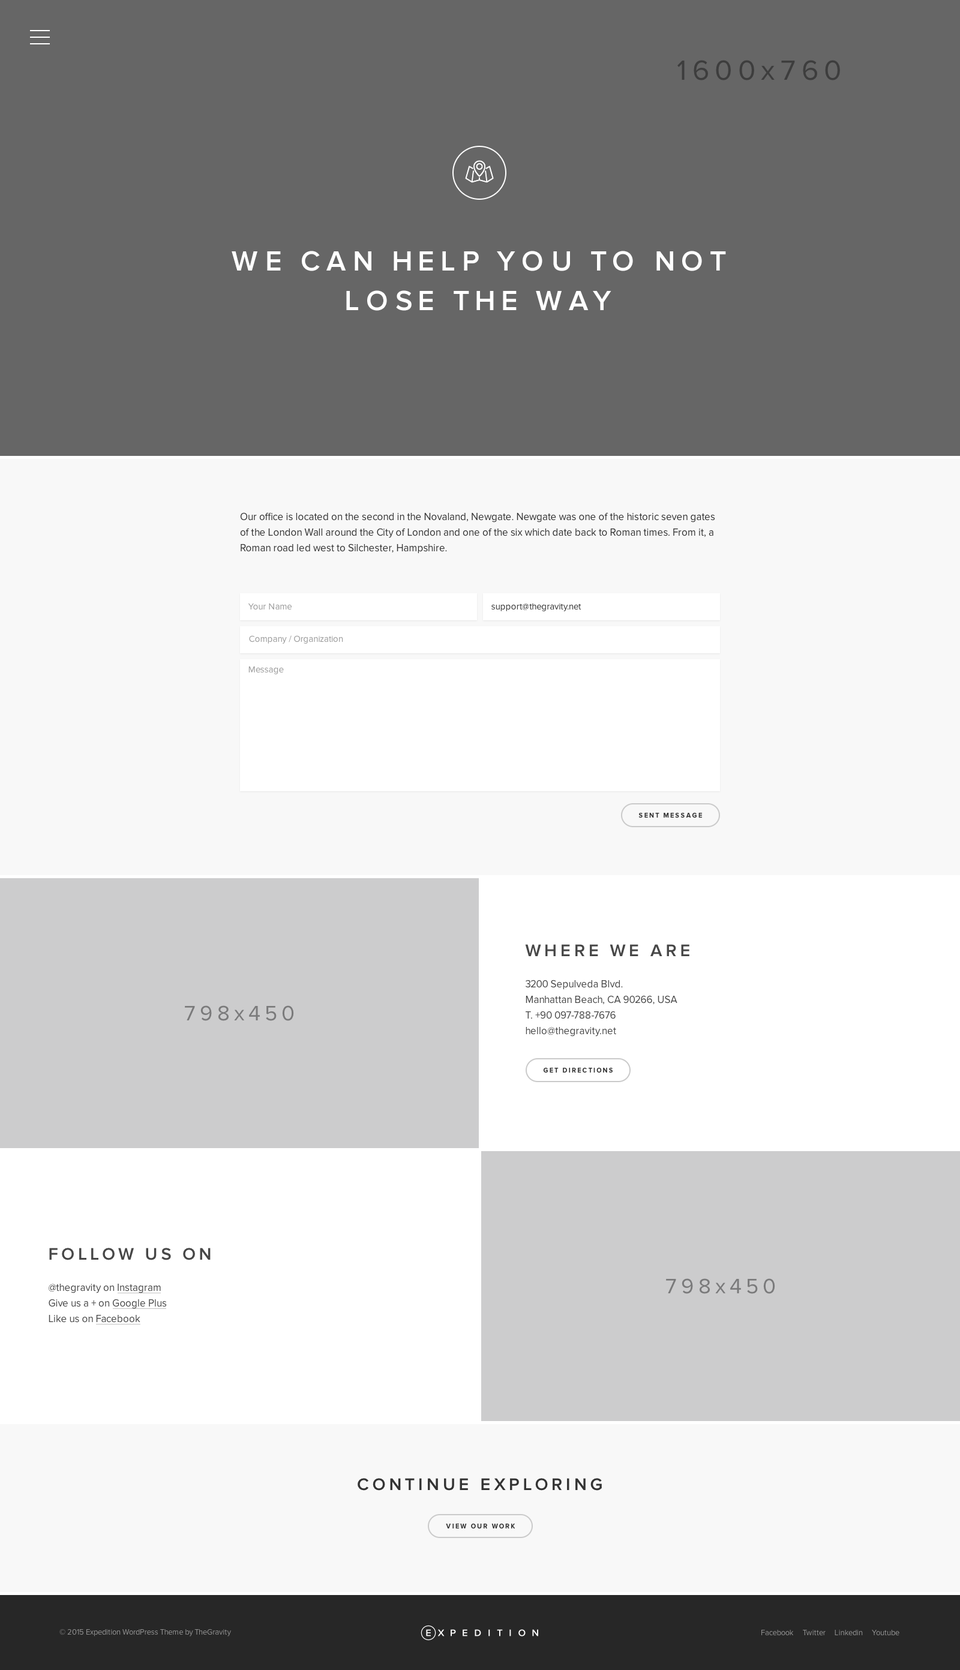
<style>
.page{position:relative;width:960px;height:1670px;background:#f8f8f8}
.page>*{position:absolute;margin:0}
.t1{font:28.8px "ProximaNova-Regular";letter-spacing:0.2em;color:#3d3d3d}
.t2{font:28.8px/39.6px "ProximaNova-Semibold";letter-spacing:0.2em;color:#ffffff;text-transform:uppercase}
.t3{font:10.2px/15.6px "ProximaNova-Regular";color:#333333}
.t4{font:9px "ProximaNova-Regular";color:#999999}
.t5{font:9px "ProximaNova-Regular";color:#333333}
.t6{font:6.6px "ProximaNova-Bold";letter-spacing:0.2em;color:#303030;text-transform:uppercase}
.t7{font:17.4px/22.8px "ProximaNova-Semibold";letter-spacing:0.2em;color:#333333;text-transform:uppercase}
.t8{font:21.6px "ProximaNova-Regular";letter-spacing:0.2em;color:#7a7a7b}
.t9{font:17.4px "ProximaNova-Semibold";letter-spacing:0.2em;color:#333333;text-transform:uppercase}
.t10{font:7.8px "ProximaNova-Regular";color:#939393}
</style>
<div class="page">
<p class="t1" style="left:677px;top:60px;width:163px;height:20px">1600x760</p>
<p class="t2" style="left:232px;top:251px;width:494px;height:60px;text-align:center">We can help you to not<br>lose the way</p>
<p class="t3" style="left:240px;top:512px;width:475px;height:42px">Our office is located on the second in the Novaland, Newgate. Newgate was one of the historic seven gates of the London Wall around the City of London and one of the six which date back to Roman times. From it, a Roman road led west to Silchester, Hampshire.</p>
<p class="t4" style="left:248px;top:604px;width:44px;height:6px">Your Name</p>
<p class="t5" style="left:491px;top:604px;width:90px;height:7px">support@thegravity.net</p>
<p class="t4" style="left:249px;top:635px;width:94px;height:9px">Company / Organization</p>
<p class="t4" style="left:248px;top:667px;width:36px;height:7px">Message</p>
<p class="t6" style="left:638px;top:812px;width:64px;height:6px">Sent message</p>
<p class="t3" style="left:525px;top:944px;width:164px;height:93px"><span class="t7">Where we are<br></span><br>3200 Sepulveda Blvd.<br>Manhattan Beach, CA 90266, USA<br>T. +90 097-788-7676<br>hello@thegravity.net</p>
<p class="t8" style="left:185px;top:1006px;width:109px;height:15px">798x450</p>
<p class="t6" style="left:543px;top:1067px;width:70px;height:6px">Get directions</p>
<p class="t3" style="left:49px;top:1248px;width:162px;height:75px"><span class="t7">Follow us on<br></span><br>@thegravity on Instagram<br>Give us a + on Google Plus<br>Like us on Facebook</p>
<p class="t8" style="left:666px;top:1279px;width:109px;height:15px">798x450</p>
<p class="t9" style="left:358px;top:1478px;width:244px;height:13px">Continue Exploring</p>
<p class="t6" style="left:446px;top:1524px;width:69px;height:5px">View our work</p>
<p class="t10" style="left:59px;top:1629px;width:172px;height:8px">© 2015 Expedition WordPress Theme by TheGravity</p>
<p class="t10" style="left:761px;top:1630px;width:138px;height:6px">Facebook     Twitter     Linkedin     Youtube</p>
</div>
